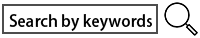
<style>
.page{position:relative;width:200px;height:38px;background:#ffffff}
.page>*{position:absolute;margin:0}
.t1{font:16px "AdobeHeitiStd-Regular";color:#000000}
</style>
<div class="page">
<p class="t1" style="left:9px;top:14px;width:143px;height:17px">Search by keywords</p>
</div>
